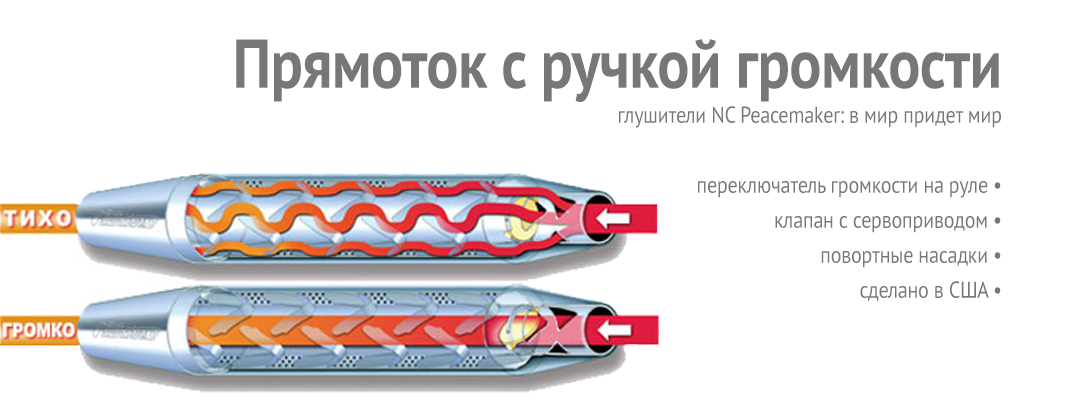
<style>
.page{position:relative;width:1067px;height:400px;background:#ffffff}
.page>*{position:absolute;margin:0}
.t1{font:23px/35px "PTSans-Regular";letter-spacing:-0.01em;color:#777777;scale:0.87 1}
.t2{font:69px/34px "PTSans-Bold";letter-spacing:-0.01em;color:#777777;scale:0.87 1}
</style>
<div class="page">
<p class="t1" style="left:236px;top:39px;width:765px;height:262px;text-align:right"><span class="t2">Прямоток с ручкой громкости<br></span>глушители NC Peacemaker: в мир придет мир<br><br>переключатель громкости на руле •<br>клапан с сервоприводом •<br>повортные насадки •<br>сделано в США •</p>
</div>
